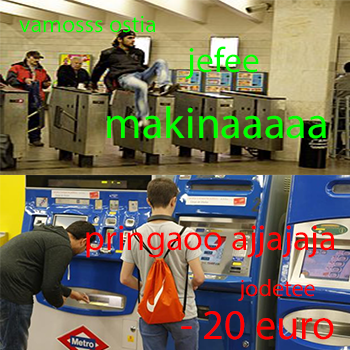
<style>
.page{position:relative;width:350px;height:350px}
.page>*{position:absolute;margin:0}
.t1{font:24px "MyriadPro-Regular";color:#00ff00}
.t2{font:35.7px "MyriadPro-Regular";color:#00ff00}
.t3{font:44.8px "MyriadPro-Regular";color:#00ff00}
.t4{font:36.3px "MyriadPro-Regular";color:#ff0000}
.t5{font:24px "MyriadPro-Regular";color:#ff0000}
.t6{font:42.2px "MyriadPro-Regular";color:#ff0000}
</style>
<div class="page">
<p class="t1" style="left:19px;top:15px;width:137px;height:18px">vamosss ostia</p>
<p class="t2" style="left:185px;top:46px;width:74px;height:34px">jefee</p>
<p class="t3" style="left:107px;top:106px;width:219px;height:33px">makinaaaaa</p>
<p class="t4" style="left:86px;top:225px;width:249px;height:33px">pringaoo ajjajaja</p>
<p class="t5" style="left:238px;top:279px;width:77px;height:22px">jodetee</p>
<p class="t6" style="left:181px;top:311px;width:153px;height:29px">- 20 euro</p>
</div>
